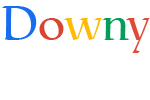
<style>
.page{position:relative;width:150px;height:100px;background:#ffffff}
.page>*{position:absolute;margin:0}
.t1{font:48px "Catull";color:#176dee}
.t2{font:48px "Catull";color:#d94530}
.t3{font:48px "Catull";color:#ffba02}
.t4{font:48px "Catull";color:#019e59}
.t5{font:48px "Catull";color:#de4c38}
</style>
<div class="page">
<p class="t1" style="left:2px;top:6px;width:148px;height:47px">D<span class="t2">o</span><span class="t3">w</span><span class="t4">n</span><span class="t5">y</span></p>
</div>
